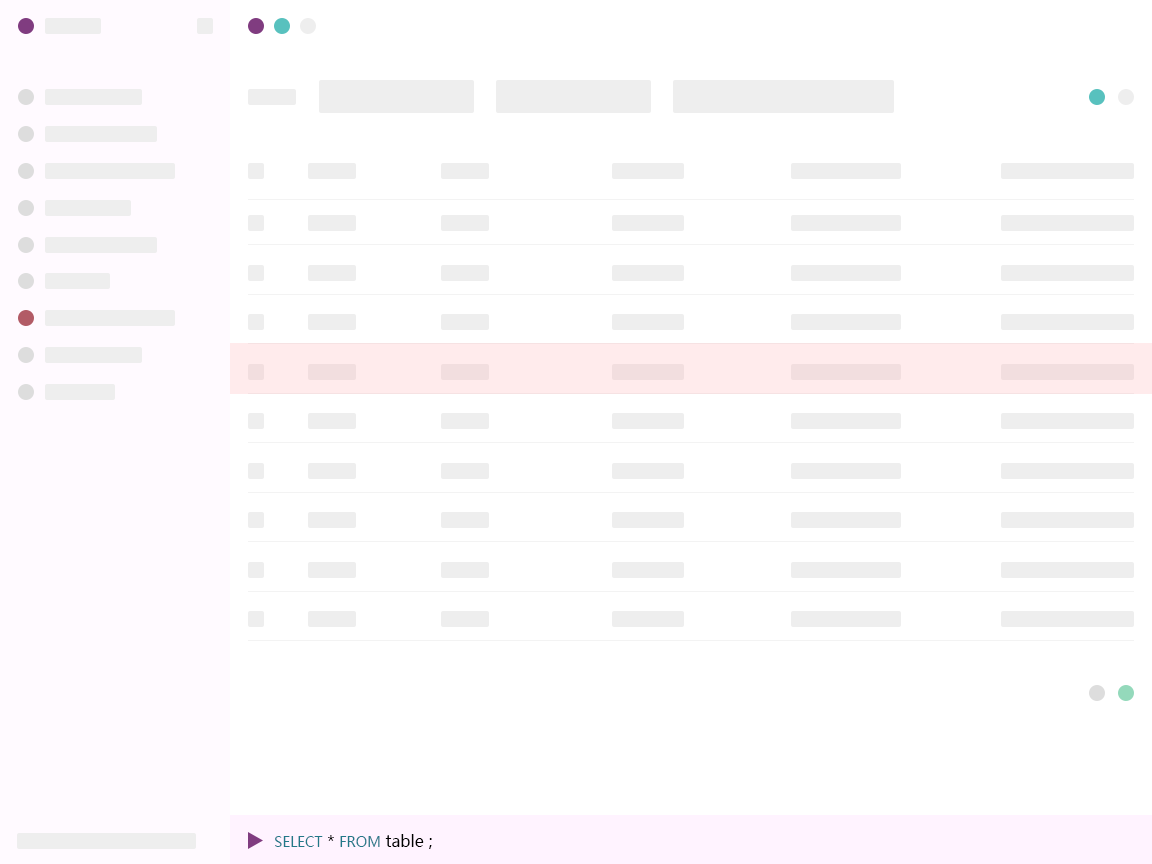
<style>
.page{position:relative;width:1152px;height:864px;background:#ffffff}
.page>*{position:absolute;margin:0}
.t1{font:16px "MicrosoftYaHei";color:#000000}
.t2{font:14px "MicrosoftYaHei";color:#227889}
</style>
<div class="page">
<p class="t1" style="left:275px;top:834px;width:157px;height:15px"><span class="t2">SELECT</span> * <span class="t2">FROM</span> table ;</p>
</div>
